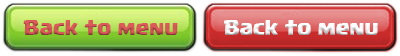
<style>
.page{position:relative;width:400px;height:56px}
.page>*{position:absolute;margin:0}
.t1{font:16px "Supercell-Magic";color:#dc5a5a}
.t2{font:16.1px "Supercell-Magic";color:#ffffff}
</style>
<div class="page">
<p class="t1" style="left:23px;top:20px;width:155px;height:15px">Back to menu</p>
<p class="t2" style="left:224px;top:20px;width:154px;height:15px">Back to menu</p>
</div>
